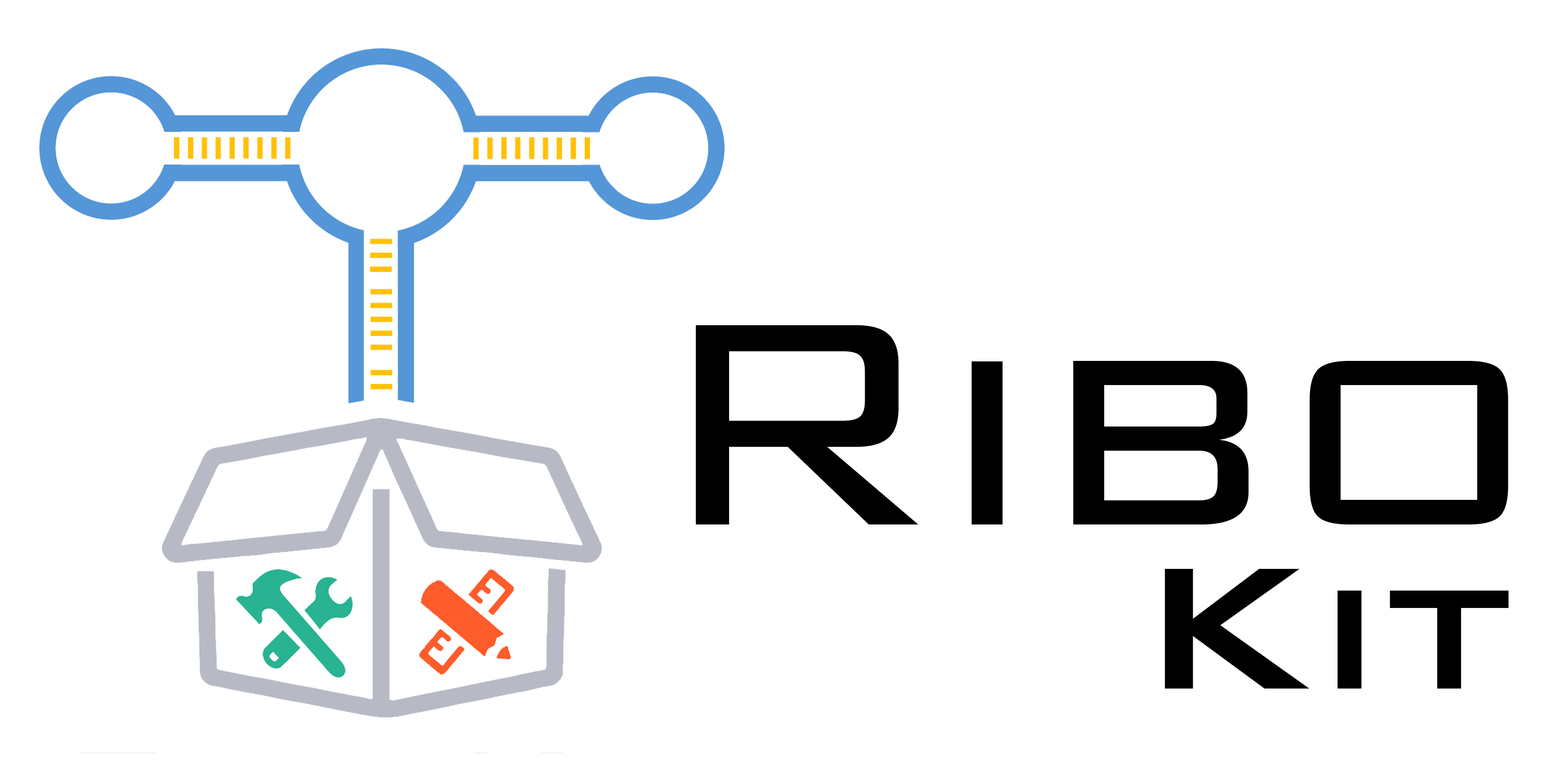
<style>
.page{position:relative;width:1544px;height:772px;background:#ffffff}
.page>*{position:absolute;margin:0}
.t1{font:386.1px "BankGothic-Light";letter-spacing:-0.01em;color:#000000}
.t2{font:231.6px "BankGothic-Medium";letter-spacing:-0.01em;color:#000000}
</style>
<div class="page">
<p class="t1" style="left:696px;top:325px;width:813px;height:200px">Ribo</p>
<p class="t2" style="left:1165px;top:569px;width:344px;height:120px">Kit</p>
</div>
